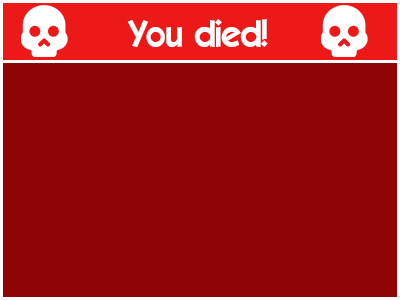
<style>
.page{position:relative;width:400px;height:300px;background:#8f0404}
.page>*{position:absolute;margin:0}
.t1{font:36px "ELEGANCE";color:#ffffff}
</style>
<div class="page">
<p class="t1" style="left:127px;top:19px;width:141px;height:28px">You died!</p>
</div>
